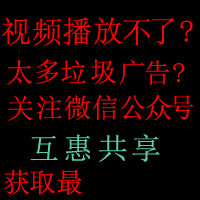
<style>
.page{position:relative;width:200px;height:200px;background:#010000}
.page>*{position:absolute;margin:0}
.t1{font:30px "SimSun";color:#ff0000}
.t2{font:27px "SimSun";color:#ff0000}
.t3{font:30px "SimSun";color:#56cca9}
</style>
<div class="page">
<p class="t1" style="left:2px;top:17px;width:28px;height:28px">视</p>
<p class="t1" style="left:63px;top:17px;width:28px;height:29px">播</p>
<p class="t1" style="left:94px;top:17px;width:28px;height:28px">放</p>
<p class="t1" style="left:33px;top:18px;width:28px;height:28px">频</p>
<p class="t1" style="left:123px;top:18px;width:28px;height:28px">不</p>
<p class="t1" style="left:151px;top:18px;width:24px;height:27px">了</p>
<p class="t1" style="left:180px;top:20px;width:13px;height:22px">?</p>
<p class="t2" style="left:7px;top:60px;width:25px;height:25px">太</p>
<p class="t2" style="left:36px;top:59px;width:23px;height:25px">多</p>
<p class="t2" style="left:61px;top:60px;width:25px;height:24px">垃</p>
<p class="t2" style="left:91px;top:59px;width:25px;height:25px">圾</p>
<p class="t2" style="left:120px;top:60px;width:25px;height:25px">广</p>
<p class="t2" style="left:145px;top:60px;width:25px;height:26px">告</p>
<p class="t2" style="left:173px;top:63px;width:12px;height:20px">?</p>
<p class="t2" style="left:8px;top:95px;width:25px;height:26px">关</p>
<p class="t2" style="left:37px;top:95px;width:25px;height:25px">注</p>
<p class="t2" style="left:65px;top:95px;width:25px;height:25px">微</p>
<p class="t2" style="left:93px;top:95px;width:25px;height:25px">信</p>
<p class="t2" style="left:120px;top:95px;width:25px;height:25px">公</p>
<p class="t2" style="left:146px;top:94px;width:25px;height:26px">众</p>
<p class="t2" style="left:169px;top:95px;width:25px;height:25px">号</p>
<p class="t3" style="left:30px;top:135px;width:28px;height:26px">互</p>
<p class="t3" style="left:65px;top:134px;width:26px;height:27px">惠</p>
<p class="t3" style="left:99px;top:134px;width:28px;height:28px">共</p>
<p class="t3" style="left:132px;top:134px;width:28px;height:28px">享</p>
<p class="t2" style="left:4px;top:169px;width:25px;height:26px">获</p>
<p class="t2" style="left:30px;top:170px;width:25px;height:25px">取</p>
<p class="t2" style="left:57px;top:169px;width:25px;height:26px">最</p>
</div>
